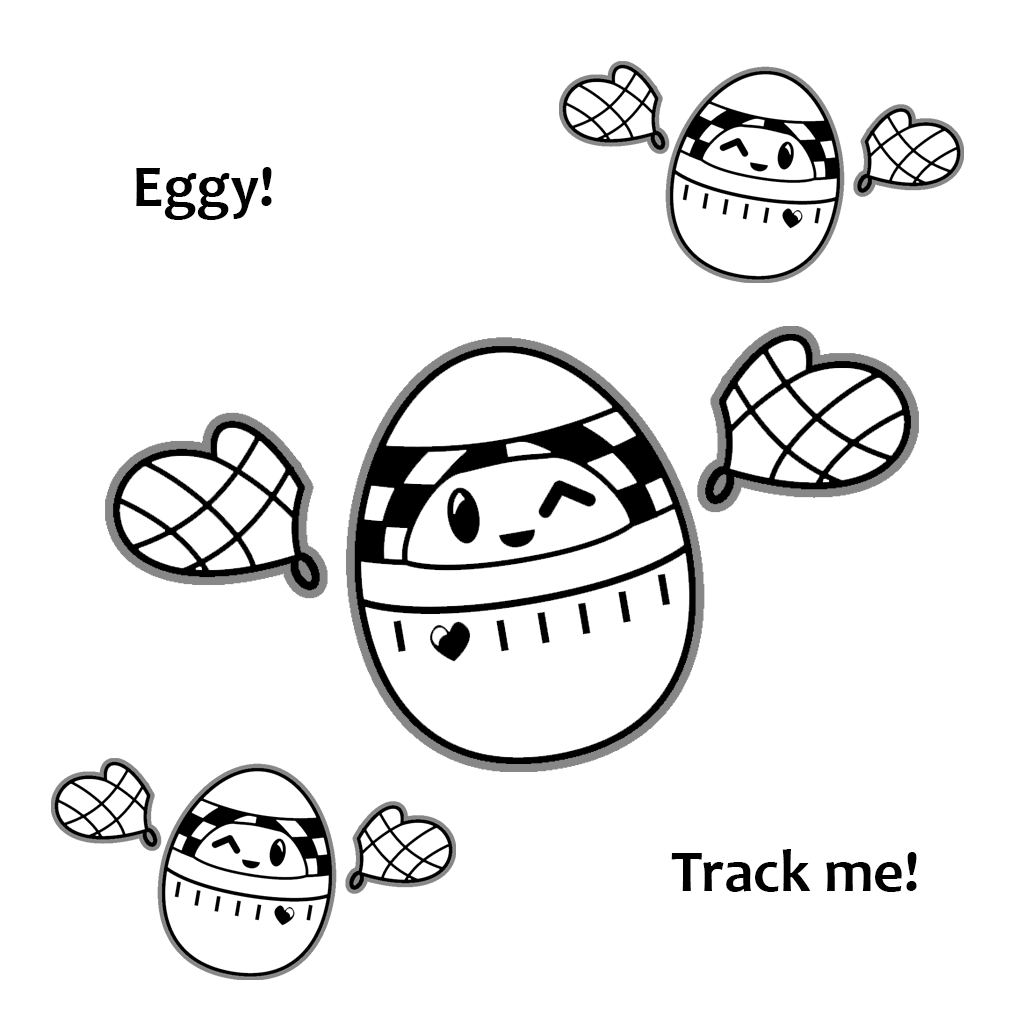
<style>
.page{position:relative;width:1024px;height:1024px;background:#ffffff}
.page>*{position:absolute;margin:0}
.t1{font:60px "Candara-Bold";color:#000000}
</style>
<div class="page">
<p class="t1" style="left:136px;top:167px;width:136px;height:53px">Eggy!</p>
<p class="t1" style="left:671px;top:849px;width:246px;height:43px">Track me!</p>
</div>
